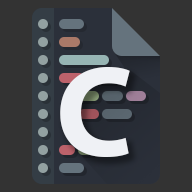
<style>
.page{position:relative;width:192px;height:192px;background:#333333}
.page>*{position:absolute;margin:0}
.t1{font:130px "MyriadPro-Bold";color:#eff1f5}
</style>
<div class="page">
<p class="t1" style="left:60px;top:67px;width:70px;height:90px">C</p>
</div>
